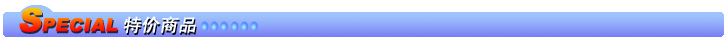
<style>
.page{position:relative;width:724px;height:42px;background:#ffffff}
.page>*{position:absolute;margin:0}
.t1{font:18px "Arial-Black";font-variant:small-caps;font-weight:bold;font-style:italic}
.t2{font:32px "Arial-Black";font-variant:small-caps;font-weight:bold;font-style:italic}
.t3{font:18px "SimHei";color:#ffffff;font-variant:small-caps;font-weight:bold;font-style:italic}
</style>
<div class="page">
<p class="t1" style="left:19px;top:7px;width:99px;height:25px"><span class="t2">S</span>PECIAL</p>
<p class="t3" style="left:123px;top:16px;width:73px;height:17px">特价商品</p>
</div>
